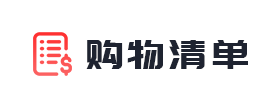
<style>
.page{position:relative;width:280px;height:100px;background:#ffffff}
.page>*{position:absolute;margin:0}
.t1{font:40px "PangMenZhengDao";letter-spacing:0.1em;color:#1e2330}
</style>
<div class="page">
<p class="t1" style="left:86px;top:40px;width:162px;height:29px">购物清单</p>
</div>
